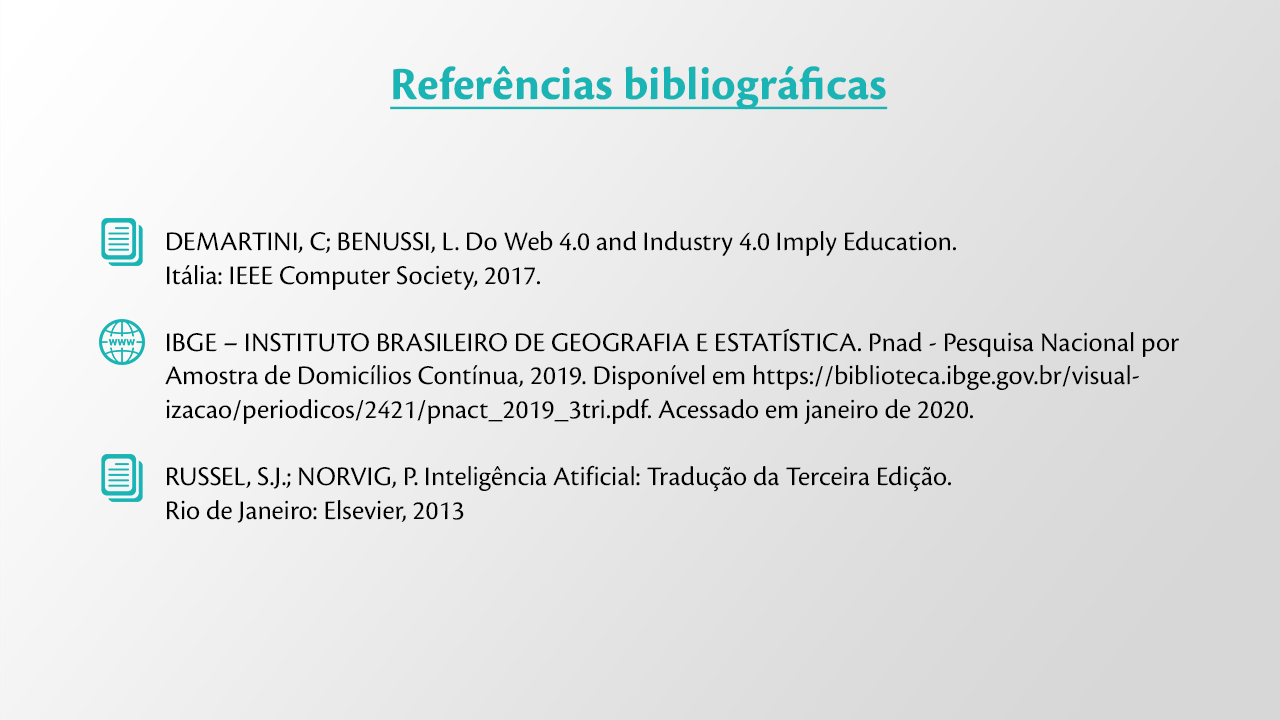
<style>
.page{position:relative;width:1280px;height:720px}
.page>*{position:absolute;margin:0}
.t1{font:48px "CronosPro-Bold";color:#1ab4b4;text-decoration:underline}
.t2{font:28px "CronosPro-Regular";color:#000000}
</style>
<div class="page">
<p class="t1" style="left:390px;top:66px;width:498px;height:44px">Referências bibliográficas</p>
<p class="t2" style="left:165px;top:231px;width:1014px;height:292px">DEMARTINI, C; BENUSSI, L. Do Web 4.0 and Industry 4.0 Imply Education. <br>Itália: IEEE Computer Society, 2017.<br><br>IBGE – INSTITUTO BRASILEIRO DE GEOGRAFIA E ESTATÍSTICA. Pnad - Pesquisa Nacional por Amostra de Domicílios Contínua, 2019. Disponível em https://biblioteca.ibge.gov.br/visualizacao/periodicos/2421/pnact_2019_3tri.pdf. Acessado em janeiro de 2020.<br><br>RUSSEL, S.J.; NORVIG, P. Inteligência Atificial: Tradução da Terceira Edição. <br>Rio de Janeiro: Elsevier, 2013</p>
</div>
